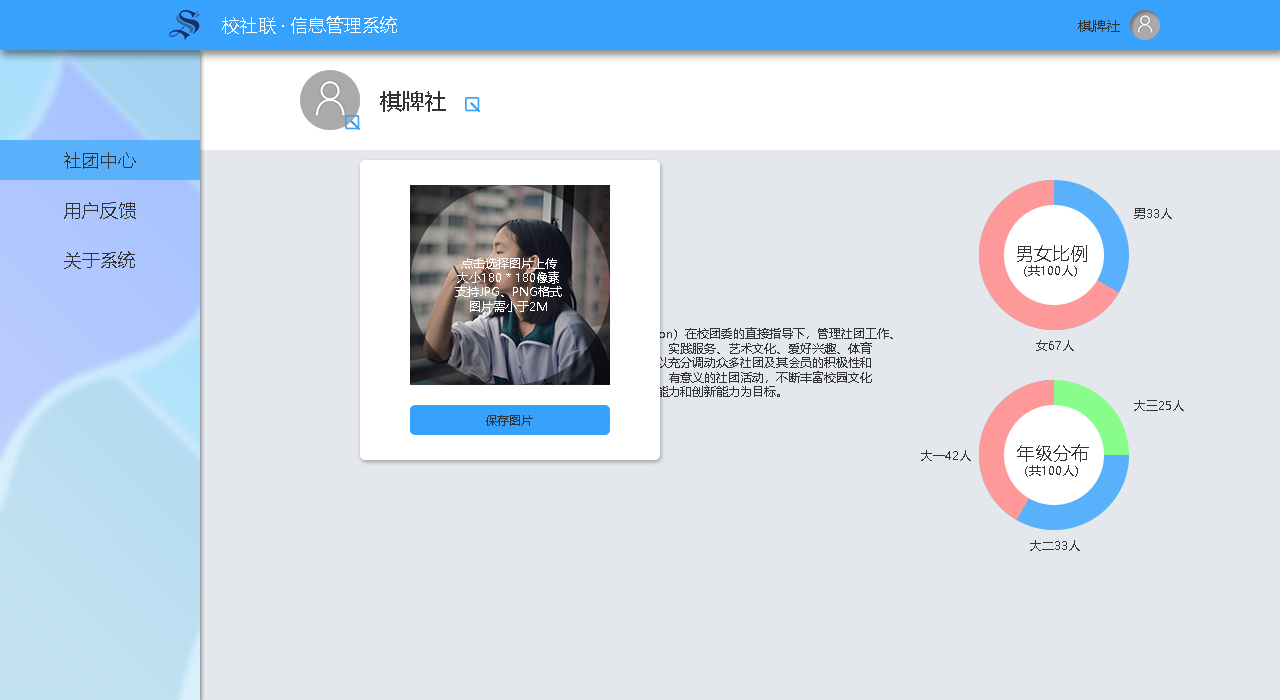
<style>
.page{position:relative;width:1280px;height:700px;background:#e4e8ec}
.page>*{position:absolute;margin:0}
.t1{font:18px "MicrosoftYaHei";color:#ffffff}
.t2{font:14px "MicrosoftYaHei";color:#333333}
.t3{font:22px "MicrosoftYaHei";color:#333333}
.t4{font:18px "MicrosoftYaHei";color:#333333}
.t5{font:12px "MicrosoftYaHei";color:#333333}
.t6{font:12px "MicrosoftYaHei";color:#ffffff}
.t7{font:12px "MicrosoftYaHei"}
.t8{font:18px "MicrosoftYaHei"}
</style>
<div class="page">
<p class="t1" style="left:222px;top:16px;width:175px;height:18px">校社联 · 信息管理系统</p>
<p class="t2" style="left:1078px;top:20px;width:42px;height:12px">棋牌社</p>
<p class="t3" style="left:380px;top:91px;width:66px;height:21px">棋牌社</p>
<p class="t4" style="left:64px;top:152px;width:72px;height:17px">社团中心</p>
<p class="t4" style="left:64px;top:202px;width:72px;height:17px">用户反馈</p>
<p class="t5" style="left:1134px;top:208px;width:38px;height:11px">男33人</p>
<p class="t5" style="left:1017px;top:245px;width:70px;height:32px"><span class="t4">男女比例<br></span>（共100人）</p>
<p class="t4" style="left:64px;top:251px;width:71px;height:18px">关于系统</p>
<p class="t6" style="left:455px;top:258px;width:107px;height:54px;text-align:center">点击选择图片上传<br>大小180 * 180像素<br>支持JPG、PNG格式<br>图片需小于2M</p>
<p class="t7" style="left:380px;top:309px;width:513px;height:88px"><span class="t8">组织描述：<br></span>         学生社团联合会（Students' Association Union）在校团委的直接指导下，管理社团工作、<br>服务社团发展的学生组织，旗下管辖着涵盖文学学术、实践服务、艺术文化、爱好兴趣、体育<br>运动等功能丰富、类型兼备的各类学生社团组织。它以充分调动众多社团及其会员的积极性和<br>创造性，全面开展有深度、有内涵、有品位、有价值、有意义的社团活动，不断丰富校园文化<br>生活，提高当代大学生的学习能力、实践能力、组织能力和创新能力为目标。</p>
<p class="t5" style="left:1036px;top:340px;width:38px;height:11px">女67人</p>
<p class="t5" style="left:1134px;top:400px;width:50px;height:11px">大三25人</p>
<p class="t5" style="left:486px;top:415px;width:47px;height:11px">保存图片</p>
<p class="t5" style="left:1017px;top:444px;width:72px;height:33px"><span class="t4">年级分布<br></span>（共100人）</p>
<p class="t5" style="left:921px;top:450px;width:50px;height:11px">大一42人</p>
<p class="t5" style="left:1030px;top:540px;width:50px;height:11px">大二33人</p>
</div>
